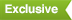
<style>
.page{position:relative;width:72px;height:20px}
.page>*{position:absolute;margin:0}
.t1{font:12px "Helvetica-Bold";letter-spacing:-0.025em;color:#ffffff}
</style>
<div class="page">
<p class="t1" style="left:5px;top:4px;width:53px;height:10px">Exclusive</p>
</div>
